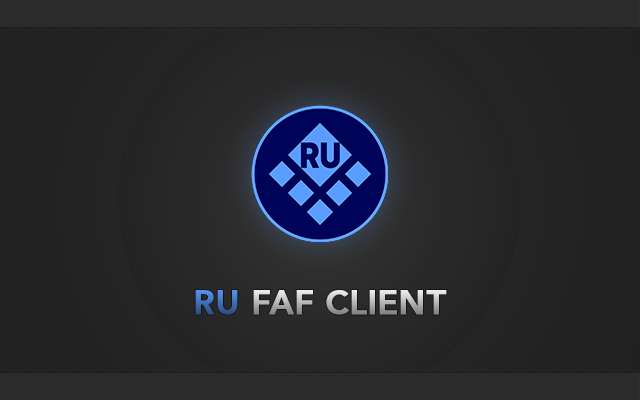
<style>
.page{position:relative;width:640px;height:400px}
.page>*{position:absolute;margin:0}
.t1{font:33.3px "AvenirLTPro-Heavy";text-transform:uppercase;font-weight:bold}
</style>
<div class="page">
<p class="t1" style="left:195px;top:290px;width:252px;height:25px">RU FAF client</p>
</div>
